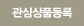
<style>
.page{position:relative;width:84px;height:26px;background:#9f9b86}
.page>*{position:absolute;margin:0}
.t1{font:11.5px "YDIYGO350";letter-spacing:-0.05em;color:#ffffff}
</style>
<div class="page">
<p class="t1" style="left:12px;top:7px;width:61px;height:11px">관심상품등록</p>
</div>
